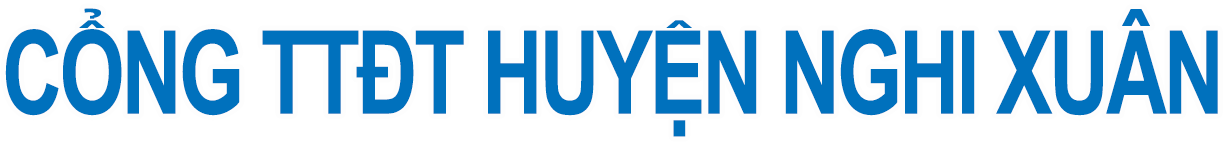
<style>
.page{position:relative;width:1228px;height:143px;background:#ffffff}
.page>*{position:absolute;margin:0}
.t1{font:115.9px "Arial-BoldMT";letter-spacing:-0.04em;color:#0071bd;scale:0.73 1}
</style>
<div class="page">
<p class="t1" style="left:5px;top:8px;width:1213px;height:129px">CỔNG TTĐT HUYỆN NGHI XUÂN</p>
</div>
